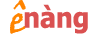
<style>
.page{position:relative;width:89px;height:36px;background:#ffffff}
.page>*{position:absolute;margin:0}
.t1{font:40px "VinerHandITC";color:#ff8400;scale:0.94 1}
.t2{font:28px "Tahoma-Bold";color:#da5151;scale:0.94 1}
</style>
<div class="page">
<p class="t1" style="left:10px;top:0px;width:16px;height:34px">ê</p>
<p class="t2" style="left:24px;top:4px;width:64px;height:30px">nàng</p>
</div>
